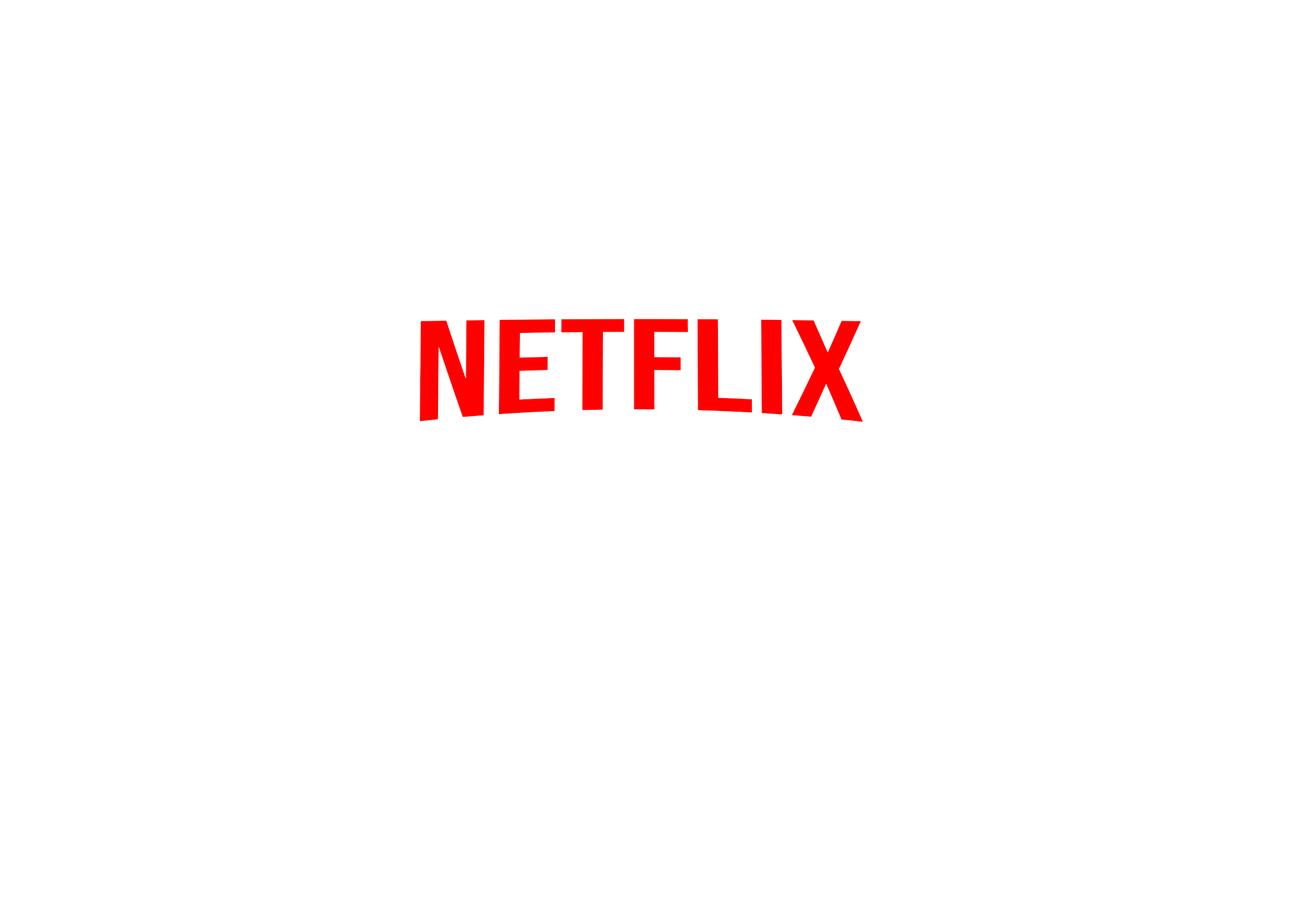
<style>
.page{position:relative;width:1292px;height:923px;background:#ffffff}
.page>*{position:absolute;margin:0}
.t1{font:184.6px "BebasNeue-Regular";color:#ff0000}
</style>
<div class="page">
<p class="t1" style="left:420px;top:319px;width:443px;height:103px">NETFLIX</p>
</div>
